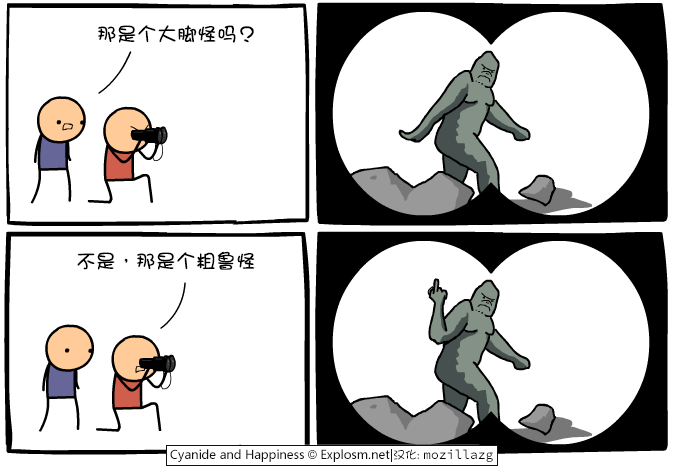
<style>
.page{position:relative;width:680px;height:470px;background:#ffffff}
.page>*{position:absolute;margin:0}
.t1{font:20px "DFGirl";color:#000000}
</style>
<div class="page">
<p class="t1" style="left:98px;top:25px;width:156px;height:18px">那是个大脚怪吗？</p>
<p class="t1" style="left:77px;top:251px;width:178px;height:19px">不是，那是个粗鲁怪</p>
</div>
